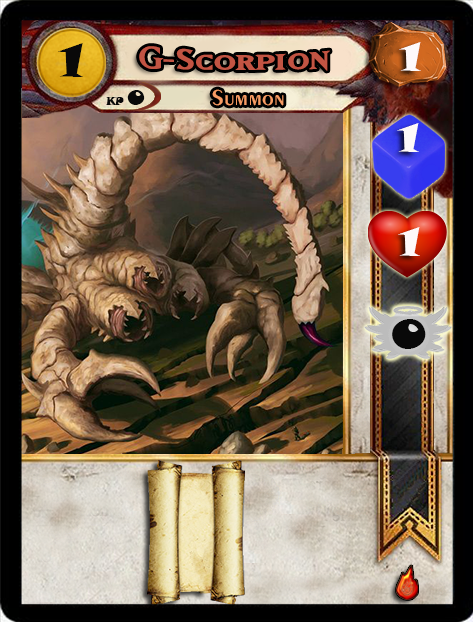
<style>
.page{position:relative;width:473px;height:622px}
.page>*{position:absolute;margin:0}
.t1{font:46.6px "SnapITC-Regular";color:#090909;scale:1.05 1}
.t2{font:40px "MatrixBoldSmallCaps";color:#c25443;scale:1.06 1}
.t3{font:40px "SnapITC-Regular";color:#fef9f9;scale:1.05 1}
.t4{font:22.7px "Exotic350BT-DemiBold";color:#f89c64;scale:1.06 1}
.t5{font:20.5px "SnapITC-Regular";color:#090909}
.t6{font:40px "SnapITC-Regular";color:#090909;scale:1.05 1}
</style>
<div class="page">
<p class="t1" style="left:58px;top:43px;width:25px;height:34px">1</p>
<p class="t2" style="left:139px;top:46px;width:191px;height:25px">G-Scorpion</p>
<p class="t3" style="left:399px;top:42px;width:22px;height:29px">1</p>
<p class="t4" style="left:212px;top:89px;width:72px;height:17px">Summon</p>
<p class="t5" style="left:127px;top:90px;width:18px;height:15px">0</p>
<p class="t3" style="left:397px;top:123px;width:22px;height:29px">1</p>
<p class="t3" style="left:398px;top:227px;width:22px;height:29px">1</p>
<p class="t6" style="left:392px;top:319px;width:34px;height:30px">0</p>
</div>
